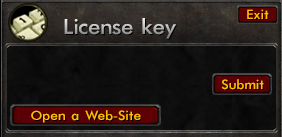
<style>
.page{position:relative;width:282px;height:137px}
.page>*{position:absolute;margin:0}
.t1{font:15px "Futura-Normal";letter-spacing:-0.005em;color:#ffc000;scale:1.05 1}
.t2{font:24.1px "Futura-Normal";letter-spacing:-0.025em;scale:1.05 1}
</style>
<div class="page">
<p class="t1" style="left:247px;top:9px;width:22px;height:10px">Exit</p>
<p class="t2" style="left:64px;top:18px;width:112px;height:21px">License key</p>
<p class="t1" style="left:221px;top:79px;width:43px;height:11px">Submit</p>
<p class="t1" style="left:31px;top:110px;width:110px;height:13px">Open a Web-Site</p>
</div>
